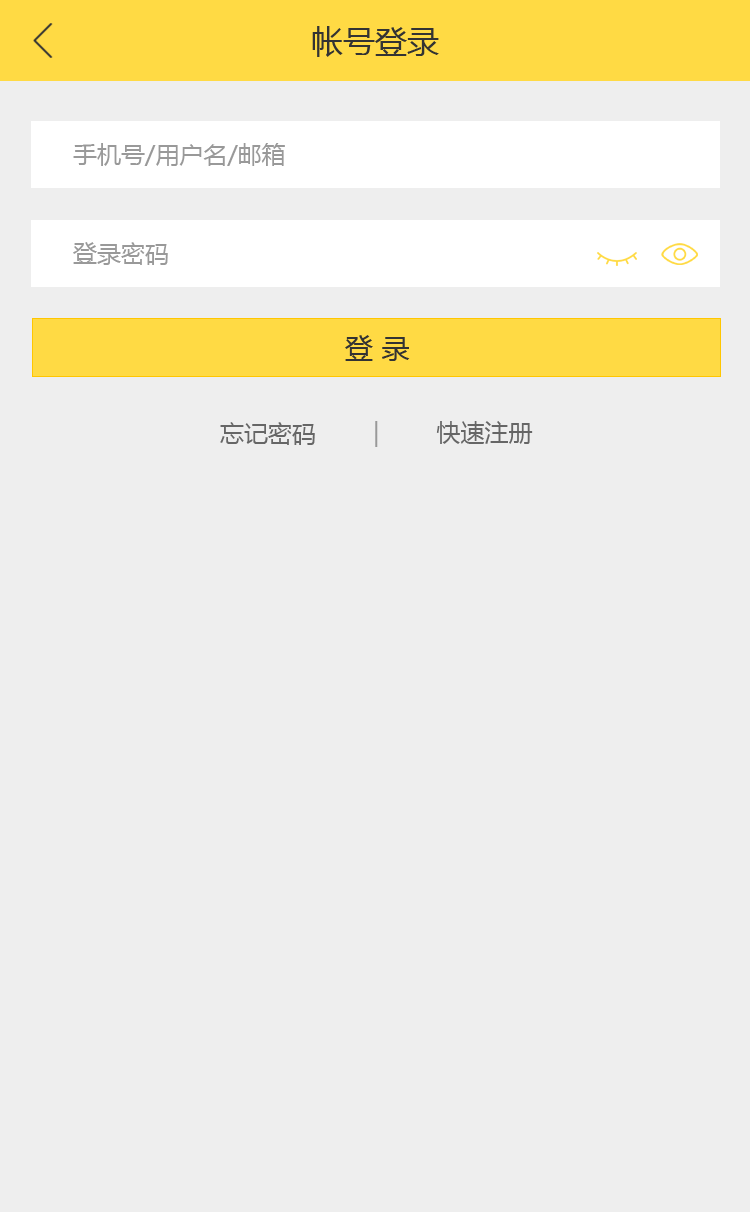
<style>
.page{position:relative;width:750px;height:1212px;background:#eeeeee}
.page>*{position:absolute;margin:0}
.t1{font:32px "MicrosoftYaHei";color:#333333}
.t2{font:24px "MicrosoftYaHei";color:#999999}
.t3{font:28px "MicrosoftYaHei";color:#333333}
.t4{font:24px "MicrosoftYaHei";color:#666666}
</style>
<div class="page">
<p class="t1" style="left:312px;top:26px;width:127px;height:31px">帐号登录</p>
<p class="t2" style="left:73px;top:143px;width:212px;height:23px">手机号/用户名/邮箱</p>
<p class="t2" style="left:73px;top:242px;width:95px;height:23px">登录密码</p>
<p class="t3" style="left:345px;top:335px;width:65px;height:26px">登 录</p>
<p class="t4" style="left:220px;top:422px;width:95px;height:23px">忘记密码</p>
<p class="t4" style="left:375px;top:421px;width:158px;height:26px"><span class="t2">| </span>       快速注册</p>
</div>
